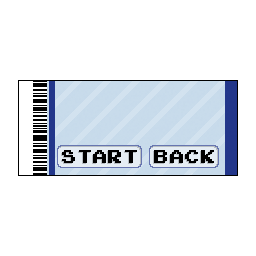
<style>
.page{position:relative;width:256px;height:256px;background:#ffffff}
.page>*{position:absolute;margin:0}
.t1{font:15px "EmulatorNormal";letter-spacing:0.025em;color:#000000}
.t2{font:15px "EmulatorNormal";letter-spacing:0.025em}
</style>
<div class="page">
<p class="t1" style="left:62px;top:150px;width:152px;height:13px">Start Back</p>
<p class="t2" style="left:61px;top:151px;width:152px;height:13px">Start Back</p>
</div>
